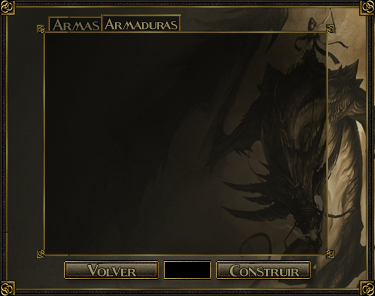
<style>
.page{position:relative;width:375px;height:296px}
.page>*{position:absolute;margin:0}
.t1{font:30px "Fleet-Street";color:#706748}
.t2{font:28px "Fleet-Street";color:#978b60}
.t3{font:30px "Fleet-Street";color:#a29566}
.t4{font:30px "Fleet-Street";color:#a09365}
</style>
<div class="page">
<p class="t1" style="left:52px;top:18px;width:48px;height:13px">Armas</p>
<p class="t2" style="left:104px;top:18px;width:74px;height:12px">Armaduras</p>
<p class="t3" style="left:87px;top:265px;width:50px;height:12px">Volver</p>
<p class="t4" style="left:230px;top:265px;width:70px;height:12px">Construir</p>
</div>
